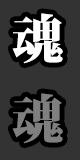
<style>
.page{position:relative;width:80px;height:160px;background:#333333}
.page>*{position:absolute;margin:0}
.t1{font:52px "KozMinPro-Heavy";color:#ffffff}
.t2{font:52px "KozMinPro-Heavy";color:#7f7f7f}
</style>
<div class="page">
<p class="t1" style="left:12px;top:13px;width:51px;height:51px">魂</p>
<p class="t2" style="left:12px;top:93px;width:51px;height:51px">魂</p>
</div>
